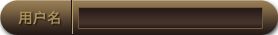
<style>
.page{position:relative;width:278px;height:35px}
.page>*{position:absolute;margin:0}
.t1{font:14px "HiraginoSansGB-W3";color:#ac8e57;font-weight:bold}
</style>
<div class="page">
<p class="t1" style="left:18px;top:10px;width:42px;height:15px">用户名</p>
</div>
